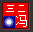
<style>
.page{position:relative;width:33px;height:32px;background:#f20000}
.page>*{position:absolute;margin:0}
.t1{font:10.4px "SimSun";color:#ffffff}
.t2{font:11.7px "SimSun";color:#ffffff}
</style>
<div class="page">
<p class="t1" style="left:6px;top:5px;width:19px;height:7px">三二</p>
<p class="t2" style="left:16px;top:15px;width:11px;height:12px">冯</p>
</div>
